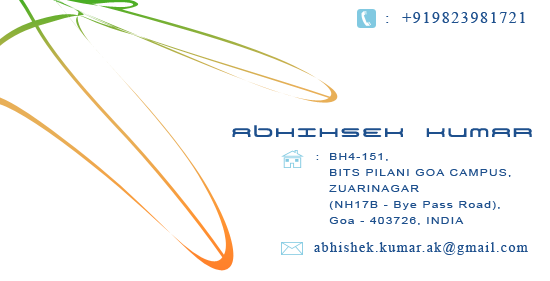
<style>
.page{position:relative;width:550px;height:281px;background:#ffffff}
.page>*{position:absolute;margin:0}
.t1{font:16px "TimesNewRomanPSMT";letter-spacing:0.1em;color:#1e508d}
.t2{font:30px "BNYear2000";letter-spacing:0.1em;color:#1e508d;scale:1.1 1}
.t3{font:10px/16px "ArialMT";letter-spacing:0.1em;color:#1e508d;scale:1.2 1}
.t4{font:14px "TimesNewRomanPSMT";letter-spacing:0.1em;color:#1e508d}
</style>
<div class="page">
<p class="t1" style="left:386px;top:12px;width:139px;height:11px">:  +919823981721</p>
<p class="t2" style="left:232px;top:125px;width:300px;height:12px">ABHIHSEK KUMAR</p>
<p class="t3" style="left:316px;top:153px;width:195px;height:72px">:  BH4-151, <br>   BITS PILANI GOA CAMPUS, <br>   ZUARINAGAR <br>   (NH17B - Bye Pass Road), <br>   Goa - 403726, INDIA</p>
<p class="t4" style="left:314px;top:242px;width:214px;height:13px">abhishek.kumar.ak@gmail.com</p>
</div>
